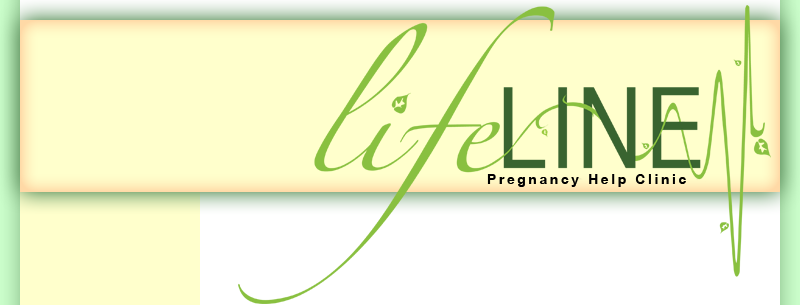
<style>
.page{position:relative;width:800px;height:305px;background:#ffffcc}
.page>*{position:absolute;margin:0}
.t1{font:14px "ArialNarrow-Bold";letter-spacing:0.16em;color:#000000;scale:1.2 1}
</style>
<div class="page">
<p class="t1" style="left:487px;top:174px;width:199px;height:13px">Pregnancy Help Clinic</p>
</div>
